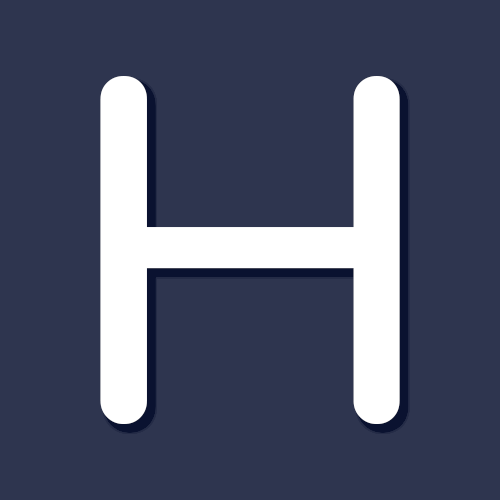
<style>
.page{position:relative;width:500px;height:500px;background:#2e354f}
.page>*{position:absolute;margin:0}
.t1{font:445.5px "Comfortaa-Bold";color:#ffffff}
</style>
<div class="page">
<p class="t1" style="left:100px;top:76px;width:300px;height:348px">H</p>
</div>
